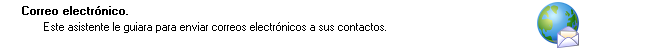
<style>
.page{position:relative;width:652px;height:52px;background:#ffffff}
.page>*{position:absolute;margin:0}
.t1{font:11.4px "MS Sans Serif";color:#000000;font-weight:bold}
.t2{font:11.4px "MS Sans Serif";color:#000000}
</style>
<div class="page">
<p class="t1" style="left:22px;top:6px;width:106px;height:9px">Correo electrónico.</p>
<p class="t2" style="left:44px;top:22px;width:342px;height:11px">Este asistente le guiara para enviar correos electrónicos a sus contactos.</p>
</div>
